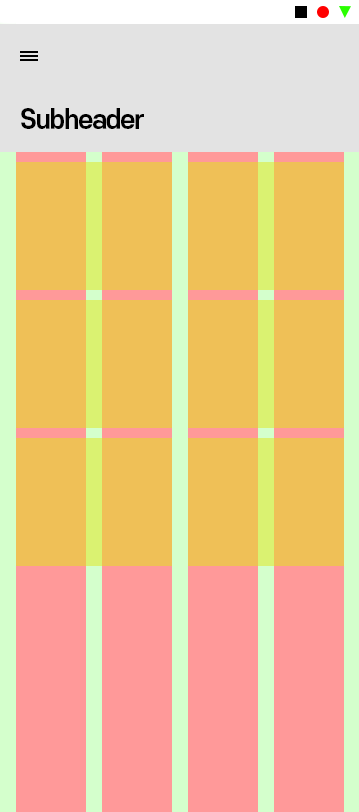
<style>
.page{position:relative;width:359px;height:812px;background:#efc057}
.page>*{position:absolute;margin:0}
.t1{font:26px "S-CoreDream-6Bold";letter-spacing:-0.055em;color:#000000}
</style>
<div class="page">
<p class="t1" style="left:21px;top:108px;width:123px;height:21px">Subheader</p>
</div>
